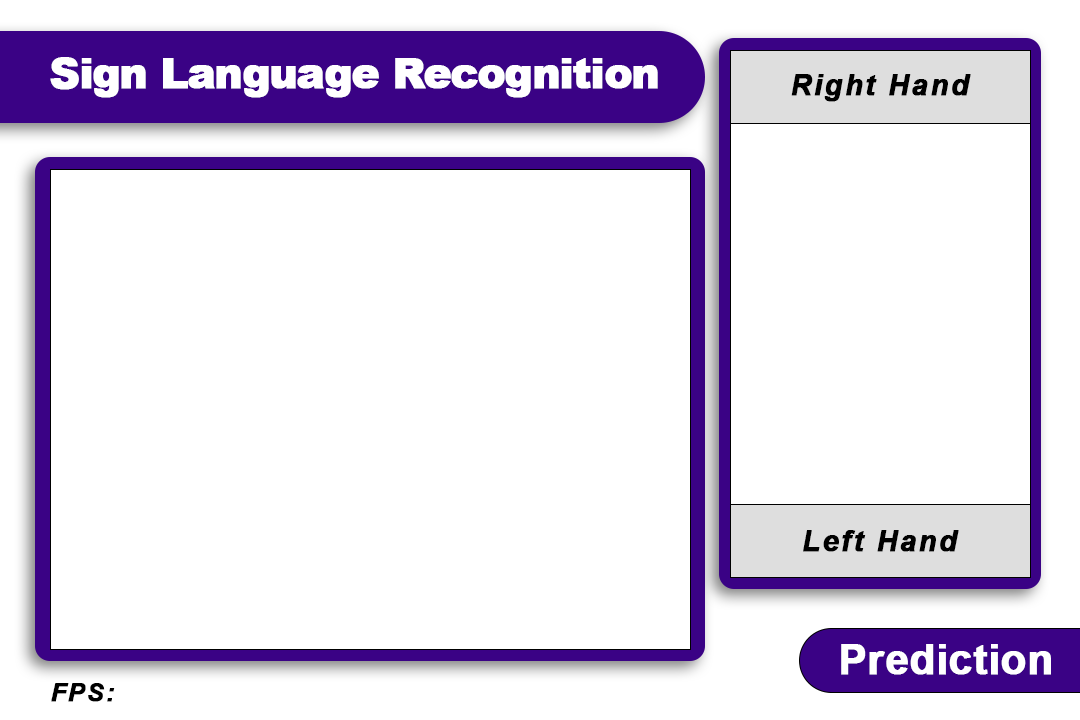
<style>
.page{position:relative;width:1080px;height:720px;background:#ffffff}
.page>*{position:absolute;margin:0}
.t1{font:41.7px "Arial-Black";letter-spacing:-0.04em;color:#ffffff;font-weight:bold}
.t2{font:29.2px "Arial-BoldItalicMT";letter-spacing:0.06em;color:#000000;font-weight:bold}
.t3{font:41.7px "Arial-BoldMT";color:#ffffff;font-weight:bold}
.t4{font:25px "Arial-BoldItalicMT";letter-spacing:0.06em;color:#000000;font-weight:bold}
</style>
<div class="page">
<p class="t1" style="left:50px;top:57px;width:608px;height:41px">Sign Language Recognition</p>
<p class="t2" style="left:791px;top:74px;width:180px;height:28px">Right Hand</p>
<p class="t2" style="left:803px;top:530px;width:156px;height:22px">Left Hand</p>
<p class="t3" style="left:841px;top:644px;width:210px;height:31px">Prediction</p>
<p class="t4" style="left:51px;top:683px;width:64px;height:19px">FPS:</p>
</div>
